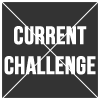
<style>
.page{position:relative;width:100px;height:100px;background:#333333}
.page>*{position:absolute;margin:0}
.t1{font:25px "BebasNeue";color:#ffffff;text-transform:uppercase;font-weight:bold}
</style>
<div class="page">
<p class="t1" style="left:4px;top:26px;width:92px;height:49px;text-align:center">Current<br>Challenge</p>
</div>
